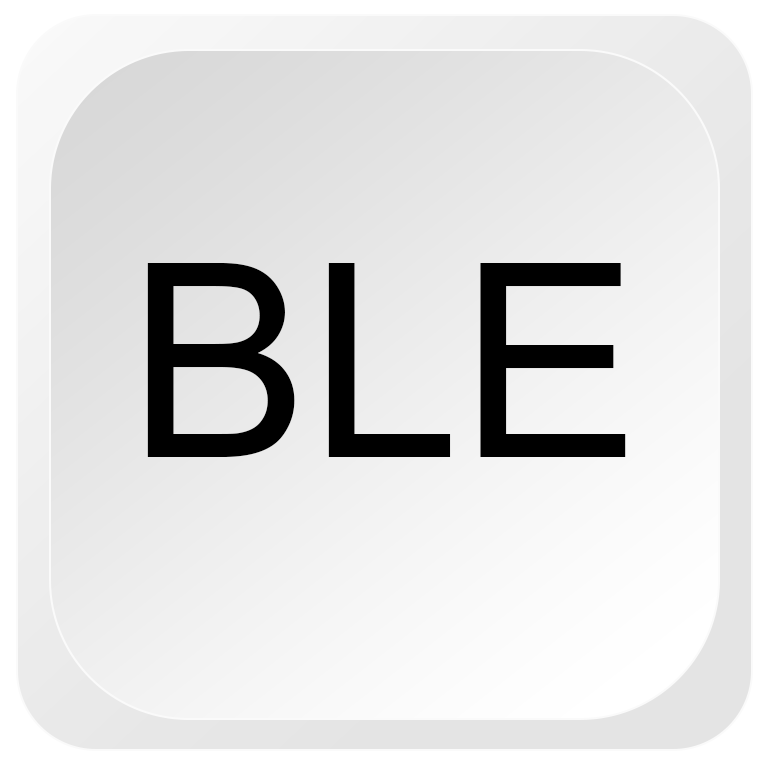
<style>
.page{position:relative;width:768px;height:768px}
.page>*{position:absolute;margin:0}
.t1{font:271px "ArialMT";color:#000000}
</style>
<div class="page">
<p class="t1" style="left:147px;top:263px;width:479px;height:194px">BLE</p>
</div>
